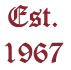
<style>
.page{position:relative;width:71px;height:70px;background:#ffffff}
.page>*{position:absolute;margin:0}
.t1{font:30px "OldEnglishTextMT";color:#872631}
</style>
<div class="page">
<p class="t1" style="left:5px;top:5px;width:59px;height:58px;text-align:center">Est.<br>1967</p>
</div>
